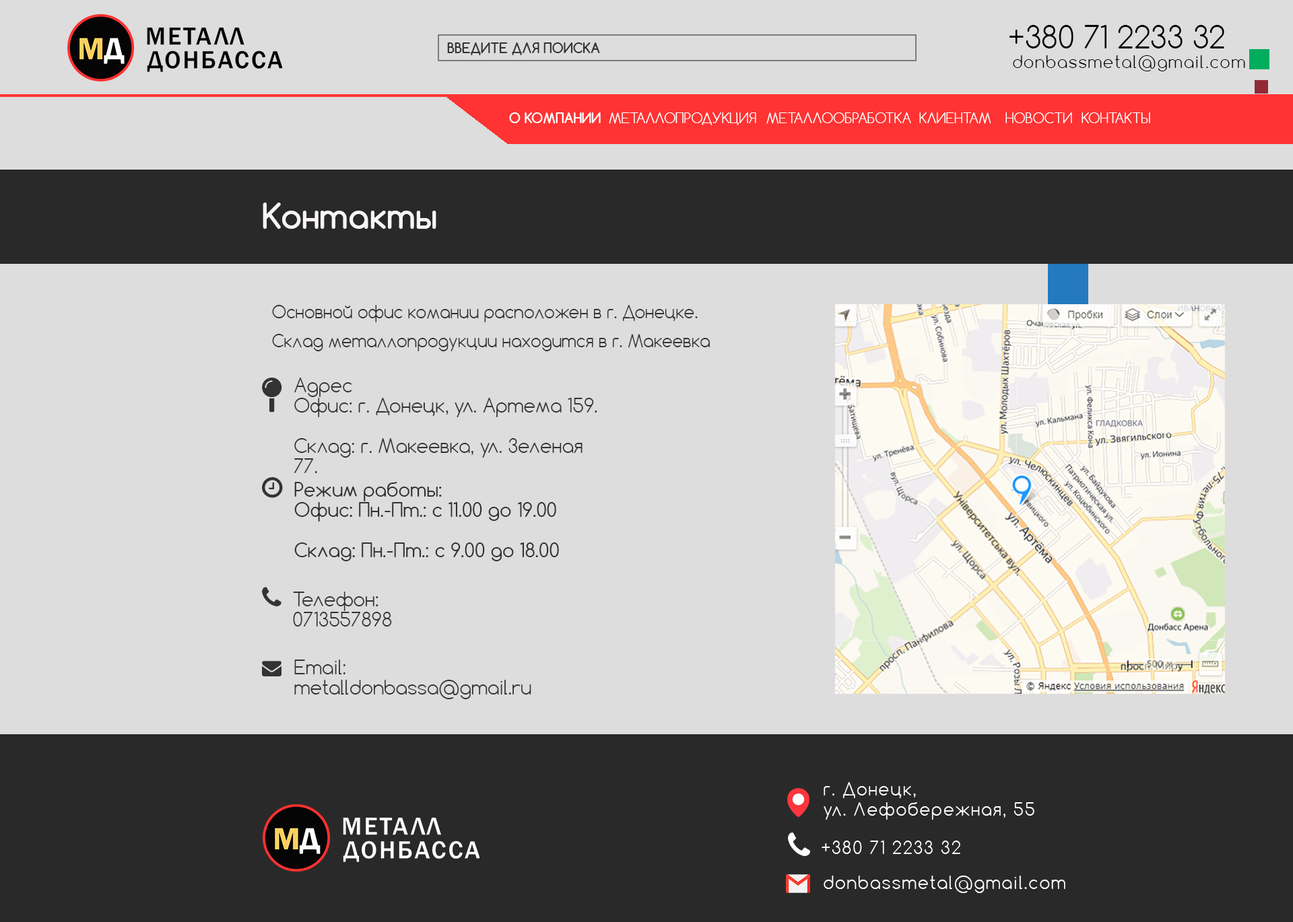
<style>
.page{position:relative;width:1293px;height:922px;background:#dddddd}
.page>*{position:absolute;margin:0}
.t1{font:30.3px "Comfortaa-Light";color:#000000}
.t2{font:13.5px "Comfortaa-Bold";color:#333333}
.t3{font:16.2px "Comfortaa-Light";letter-spacing:0.08em;color:#000000}
.t4{font:13.5px "Comfortaa-Bold";color:#ffffff}
.t5{font:13.5px "Comfortaa-Light";color:#ffffff}
.t6{font:33.7px "Comfortaa-Bold";color:#f9f5f5}
.t7{font:16.8px/28.9px "Comfortaa-Light";color:#333333}
.t8{font:18.9px/20.2px "Comfortaa-Light";color:#333333}
.t9{font:18.9px/20.2px "Comfortaa";color:#333333}
.t10{font:18.9px/20.2px "CourierNewPSMT";color:#e7eef4}
.t11{font:16.8px "Comfortaa-Light";letter-spacing:0.08em;color:#ffffff}
</style>
<div class="page">
<p class="t1" style="left:1009px;top:25px;width:215px;height:23px">+380 71 2233 32</p>
<p class="t2" style="left:447px;top:42px;width:153px;height:13px">ВВЕДИТЕ ДЛЯ ПОИСКА</p>
<p class="t3" style="left:1013px;top:55px;width:232px;height:16px">donbassmetal@gmail.com</p>
<p class="t4" style="left:509px;top:112px;width:92px;height:12px">О КОМПАНИИ</p>
<p class="t5" style="left:609px;top:112px;width:147px;height:13px">МЕТАЛЛОПРОДУКЦИЯ</p>
<p class="t5" style="left:766px;top:112px;width:145px;height:12px">МЕТАЛЛООБРАБОТКА</p>
<p class="t5" style="left:919px;top:112px;width:72px;height:12px">КЛИЕНТАМ</p>
<p class="t5" style="left:1005px;top:112px;width:67px;height:11px">НОВОСТИ</p>
<p class="t5" style="left:1081px;top:112px;width:69px;height:11px">КОНТАКТЫ</p>
<p class="t6" style="left:263px;top:203px;width:173px;height:26px">Контакты</p>
<p class="t7" style="left:272px;top:305px;width:438px;height:46px">Основной офис комании расположен в г. Донецке.<br>Склад металлопродукции находится в г. Макеевка</p>
<p class="t8" style="left:294px;top:378px;width:303px;height:95px">Адрес<br>Офис: г. Донецк, ул. Артема 159.<br><br>Склад: г. Макеевка, ул. Зеленая 77.</p>
<p class="t9" style="left:294px;top:482px;width:265px;height:80px">Режим работы:<br>Офис: Пн.-Пт.: с 11.00 до 19.00<br><br>Склад: Пн.-Пт.: с 9.00 до 18.00<br><span class="t10"></span></p>
<p class="t8" style="left:293px;top:592px;width:99px;height:35px">Телефон:<br>0713557898</p>
<p class="t8" style="left:294px;top:660px;width:237px;height:40px">Email:<br>metalldonbassa@gmail.ru</p>
<p class="t11" style="left:823px;top:782px;width:211px;height:38px">г. Донецк,<br>ул. Лефобережная, 55</p>
<p class="t11" style="left:821px;top:841px;width:139px;height:13px">+380 71 2233 32</p>
<p class="t11" style="left:823px;top:876px;width:242px;height:17px">donbassmetal@gmail.com</p>
</div>
